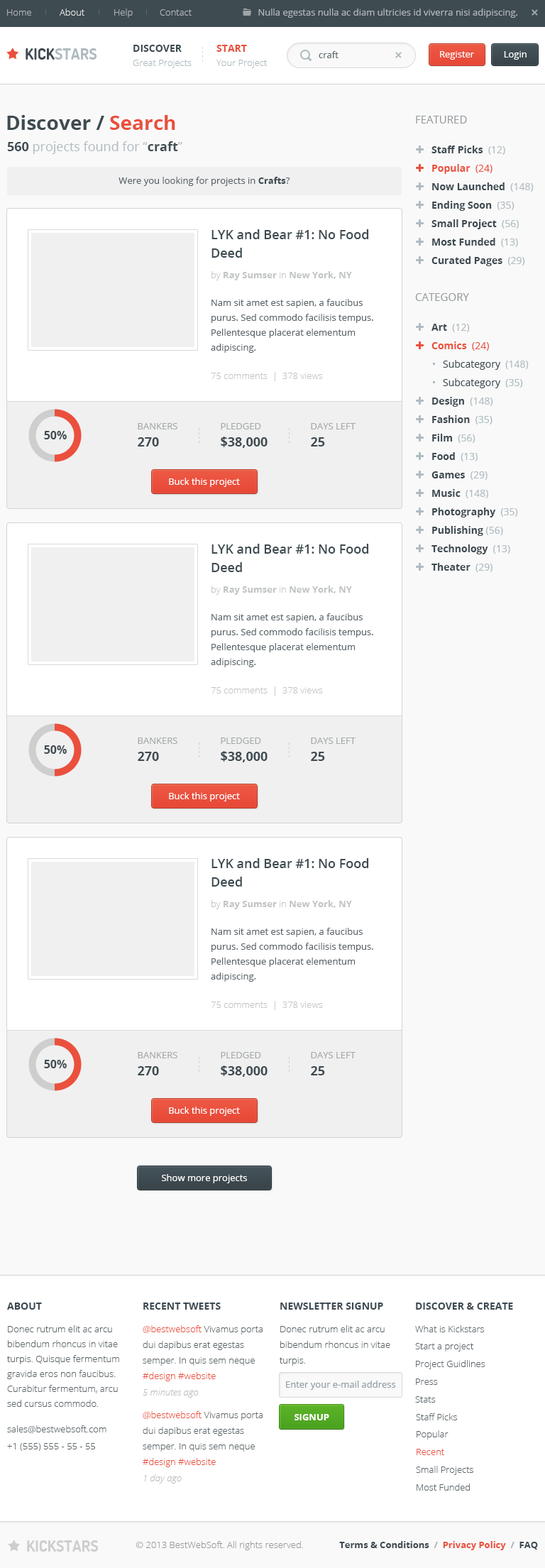
<style>
.page{position:relative;width:545px;height:1568px;background:#ffffff}
.page>*{position:absolute;margin:0}
.t1{font:9.2px "OpenSans-Light";color:#b0b4b6}
.t2{font:9.2px "OpenSans-Light";color:#e1e3e3}
.t3{font:9.2px "OpenSans";color:#b0b4b6}
.t4{font:15.6px "Dosis-Bold";color:#afbbc1;text-transform:uppercase}
.t5{font:15.6px "Dosis-Bold";color:#3e4b51;text-transform:uppercase}
.t6{font:9.9px "OpenSans-Bold";color:#3e4b51;text-transform:uppercase}
.t7{font:9.9px "OpenSans-Bold";color:#ea503d;text-transform:uppercase}
.t8{font:9.2px "OpenSans";color:#5c666b}
.t9{font:9.2px "OpenSans";color:#ffffff}
.t10{font:9.2px "OpenSans-Light";color:#afbbc1}
.t11{font:19.9px "OpenSans-Bold";color:#3e4b51}
.t12{font:19.9px "OpenSans-Bold";color:#ea503d}
.t13{font:10.6px "OpenSans";color:#979da0;text-transform:uppercase}
.t14{font:12.8px "OpenSans";color:#afbbc1}
.t15{font:12.8px "OpenSans-Bold";color:#3e4b51}
.t16{font:9.9px "OpenSans-Bold";color:#3e4b51}
.t17{font:9.9px "OpenSans";color:#afbbc1}
.t18{font:9.9px "OpenSans-Bold";color:#ea503d}
.t19{font:9.9px "OpenSans";color:#ea503d}
.t20{font:9.2px "OpenSans-Bold";color:#3e4b51}
.t21{font:12.8px/18.5px "OpenSans-Semibold";color:#3e4b51}
.t22{font:9.2px "OpenSans-Bold";color:#c1c4c5}
.t23{font:9.2px "OpenSans-Light";color:#c1c4c5}
.t24{font:9.2px/14.9px "OpenSans";color:#5c666b}
.t25{font:9.9px "OpenSans";color:#3e4b51}
.t26{font:9.2px "OpenSans";color:#a6aaac;text-transform:uppercase}
.t27{font:11.4px "OpenSans-Bold";color:#3e4b51}
.t28{font:9.9px "OpenSans-Bold";color:#3e4a51;text-transform:uppercase}
.t29{font:9.2px/14.9px "OpenSans-Light";color:#5c666b}
.t30{font:9.2px/15.6px "OpenSans-Light";color:#5c666b}
.t31{font:9.2px/15.6px "OpenSans-Light";color:#ea503d}
.t32{font:9.2px "OpenSans-Light";color:#5c666b}
.t33{font:9.2px "OpenSans";color:#909da3}
.t34{font:9.2px "OpenSansLight-Italic";color:#b9bcbe}
.t35{font:9.2px "OpenSans-Bold";color:#ffffff;text-transform:uppercase}
.t36{font:9.2px "OpenSans-Light";color:#ea503d}
.t37{font:15.6px "Dosis-Bold";color:#cecece;text-transform:uppercase}
.t38{font:9.2px "OpenSans-Light";color:#999999}
.t39{font:9.2px "OpenSans-Bold";color:#3e4a51}
.t40{font:9.2px "OpenSans-Bold";color:#aeaeae}
.t41{font:9.2px "OpenSans-Bold";color:#ea503d}
</style>
<div class="page">
<p class="t1" style="left:7px;top:9px;width:24px;height:7px">Home</p>
<p class="t2" style="left:60px;top:9px;width:24px;height:7px">About</p>
<p class="t1" style="left:114px;top:9px;width:19px;height:9px">Help</p>
<p class="t1" style="left:160px;top:9px;width:32px;height:7px">Contact</p>
<p class="t3" style="left:258px;top:9px;width:260px;height:9px">Nulla egestas nulla ac diam ultricies id viverra nisi adipiscing.</p>
<p class="t4" style="left:26px;top:48px;width:71px;height:12px"><span class="t5">Kick</span>stars</p>
<p class="t6" style="left:133px;top:45px;width:49px;height:7px">Discover</p>
<p class="t7" style="left:216px;top:45px;width:31px;height:7px">Start</p>
<p class="t8" style="left:319px;top:51px;width:20px;height:7px">craft</p>
<p class="t9" style="left:440px;top:51px;width:34px;height:9px">Register</p>
<p class="t9" style="left:504px;top:51px;width:23px;height:9px">Login</p>
<p class="t10" style="left:133px;top:60px;width:59px;height:8px">Great Projects</p>
<p class="t10" style="left:216px;top:60px;width:52px;height:8px">Your Project</p>
<p class="t11" style="left:7px;top:115px;width:168px;height:15px">Discover / <span class="t12">Search</span></p>
<p class="t13" style="left:416px;top:116px;width:51px;height:8px">Featured</p>
<p class="t14" style="left:7px;top:141px;width:175px;height:13px"><span class="t15">560</span> projects found for “<span class="t15">craft</span>”</p>
<p class="t16" style="left:432px;top:146px;width:73px;height:9px">Staff Picks <span class="t17"> (12)</span></p>
<p class="t18" style="left:432px;top:164px;width:61px;height:10px">Popular <span class="t19"> (24)</span></p>
<p class="t8" style="left:119px;top:177px;width:171px;height:9px">Were you looking for projects in <span class="t20">Crafts</span>?</p>
<p class="t16" style="left:432px;top:182px;width:102px;height:10px">Now Launched <span class="t17"> (148)</span></p>
<p class="t16" style="left:432px;top:201px;width:83px;height:10px">Ending Soon <span class="t17"> (35)</span></p>
<p class="t16" style="left:432px;top:219px;width:87px;height:10px">Small Project <span class="t17"> (56)</span></p>
<p class="t21" style="left:212px;top:229px;width:157px;height:29px">LYK and Bear #1: No Food Deed<br>Unpunished</p>
<p class="t16" style="left:432px;top:238px;width:86px;height:9px">Most Funded <span class="t17"> (13)</span></p>
<p class="t16" style="left:432px;top:256px;width:93px;height:10px">Curated Pages <span class="t17"> (29)</span></p>
<p class="t22" style="left:212px;top:271px;width:140px;height:9px"><span class="t23">by </span>Ray Sumser<span class="t23"> in </span>New York, NY</p>
<p class="t13" style="left:415px;top:293px;width:54px;height:8px">Category</p>
<p class="t24" style="left:211px;top:299px;width:162px;height:54px">Nam sit amet est sapien, a faucibus purus. Sed commodo facilisis tempus. Pellentesque placerat elementum adipiscing.</p>
<p class="t17" style="left:432px;top:324px;width:38px;height:8px"><span class="t16">Art </span> (12)</p>
<p class="t18" style="left:432px;top:341px;width:57px;height:10px">Comics <span class="t19"> (24)</span></p>
<p class="t25" style="left:443px;top:360px;width:86px;height:10px">Subcategory <span class="t17"> (148)</span></p>
<p class="t23" style="left:211px;top:372px;width:112px;height:9px">75 comments  |  378 views</p>
<p class="t25" style="left:443px;top:378px;width:80px;height:10px">Subcategory <span class="t17"> (35)</span></p>
<p class="t16" style="left:432px;top:397px;width:61px;height:10px">Design <span class="t17"> (148)</span></p>
<p class="t26" style="left:138px;top:423px;width:39px;height:6px">Bankers</p>
<p class="t26" style="left:221px;top:423px;width:40px;height:6px">Pledged</p>
<p class="t26" style="left:311px;top:423px;width:45px;height:6px">Days Left</p>
<p class="t16" style="left:432px;top:415px;width:61px;height:9px">Fashion <span class="t17"> (35)</span></p>
<p class="t27" style="left:44px;top:431px;width:23px;height:8px">50%</p>
<p class="t15" style="left:138px;top:437px;width:21px;height:9px">270</p>
<p class="t15" style="left:221px;top:437px;width:47px;height:11px">$38,000</p>
<p class="t15" style="left:311px;top:437px;width:14px;height:9px">25</p>
<p class="t16" style="left:432px;top:434px;width:44px;height:9px">Film <span class="t17"> (56)</span></p>
<p class="t16" style="left:432px;top:452px;width:46px;height:9px">Food <span class="t17"> (13)</span></p>
<p class="t16" style="left:432px;top:471px;width:56px;height:9px">Games <span class="t17"> (29)</span></p>
<p class="t9" style="left:169px;top:478px;width:71px;height:9px">Buck this project</p>
<p class="t16" style="left:432px;top:489px;width:56px;height:9px">Music <span class="t17"> (148)</span></p>
<p class="t16" style="left:432px;top:508px;width:86px;height:9px">Photography <span class="t17"> (35)</span></p>
<p class="t16" style="left:432px;top:526px;width:71px;height:10px">Publishing<span class="t17"> (56)</span></p>
<p class="t21" style="left:212px;top:544px;width:157px;height:28px">LYK and Bear #1: No Food Deed<br>Unpunished</p>
<p class="t16" style="left:432px;top:544px;width:78px;height:10px">Technology <span class="t17"> (13)</span></p>
<p class="t16" style="left:432px;top:563px;width:61px;height:9px">Theater <span class="t17"> (29)</span></p>
<p class="t22" style="left:212px;top:586px;width:140px;height:9px"><span class="t23">by </span>Ray Sumser<span class="t23"> in </span>New York, NY</p>
<p class="t24" style="left:211px;top:613px;width:162px;height:54px">Nam sit amet est sapien, a faucibus purus. Sed commodo facilisis tempus. Pellentesque placerat elementum adipiscing.</p>
<p class="t23" style="left:211px;top:686px;width:112px;height:10px">75 comments  |  378 views</p>
<p class="t26" style="left:138px;top:738px;width:39px;height:6px">Bankers</p>
<p class="t26" style="left:221px;top:738px;width:40px;height:6px">Pledged</p>
<p class="t26" style="left:311px;top:738px;width:45px;height:6px">Days Left</p>
<p class="t27" style="left:44px;top:745px;width:23px;height:9px">50%</p>
<p class="t15" style="left:138px;top:752px;width:21px;height:9px">270</p>
<p class="t15" style="left:221px;top:751px;width:47px;height:11px">$38,000</p>
<p class="t15" style="left:311px;top:752px;width:14px;height:9px">25</p>
<p class="t9" style="left:169px;top:792px;width:71px;height:9px">Buck this project</p>
<p class="t21" style="left:212px;top:858px;width:157px;height:29px">LYK and Bear #1: No Food Deed<br>Unpunished</p>
<p class="t22" style="left:212px;top:900px;width:140px;height:9px"><span class="t23">by </span>Ray Sumser<span class="t23"> in </span>New York, NY</p>
<p class="t24" style="left:211px;top:928px;width:162px;height:54px">Nam sit amet est sapien, a faucibus purus. Sed commodo facilisis tempus. Pellentesque placerat elementum adipiscing.</p>
<p class="t23" style="left:211px;top:1001px;width:112px;height:9px">75 comments  |  378 views</p>
<p class="t27" style="left:44px;top:1060px;width:23px;height:8px">50%</p>
<p class="t26" style="left:138px;top:1052px;width:39px;height:6px">Bankers</p>
<p class="t26" style="left:221px;top:1052px;width:40px;height:6px">Pledged</p>
<p class="t26" style="left:311px;top:1052px;width:45px;height:6px">Days Left</p>
<p class="t15" style="left:138px;top:1066px;width:21px;height:9px">270</p>
<p class="t15" style="left:221px;top:1065px;width:47px;height:12px">$38,000</p>
<p class="t15" style="left:311px;top:1066px;width:14px;height:9px">25</p>
<p class="t9" style="left:169px;top:1107px;width:71px;height:9px">Buck this project</p>
<p class="t9" style="left:162px;top:1174px;width:85px;height:9px">Show more projects</p>
<p class="t28" style="left:7px;top:1303px;width:35px;height:7px">About</p>
<p class="t28" style="left:143px;top:1303px;width:78px;height:7px">Recent Tweets</p>
<p class="t28" style="left:280px;top:1303px;width:103px;height:7px">Newsletter Signup</p>
<p class="t28" style="left:416px;top:1303px;width:97px;height:7px">Discover &amp; Create</p>
<p class="t29" style="left:7px;top:1325px;width:112px;height:82px">Donec rutrum elit ac arcu bibendum rhoncus in vitae turpis. Quisque fermentum gravida eros non faucibus. Curabitur fermentum, arcu sed cursus commodo.</p>
<p class="t30" style="left:143px;top:1325px;width:120px;height:56px"><span class="t31">@bestwebsoft</span> Vivamus porta dui dapibus erat egestas semper. In quis sem neque <span class="t31">#design #website</span></p>
<p class="t30" style="left:280px;top:1325px;width:110px;height:41px">Donec rutrum elit ac arcu bibendum rhoncus in vitae turpis.</p>
<p class="t32" style="left:415px;top:1325px;width:69px;height:7px">What is Kickstars</p>
<p class="t32" style="left:415px;top:1343px;width:59px;height:9px">Start a project</p>
<p class="t32" style="left:416px;top:1360px;width:70px;height:9px">Project Guidlines</p>
<p class="t33" style="left:286px;top:1381px;width:110px;height:9px">Enter your e-mail address</p>
<p class="t32" style="left:416px;top:1378px;width:22px;height:7px">Press</p>
<p class="t34" style="left:143px;top:1388px;width:56px;height:10px">5 minutes ago</p>
<p class="t32" style="left:415px;top:1396px;width:21px;height:7px">Stats</p>
<p class="t30" style="left:143px;top:1411px;width:120px;height:56px"><span class="t31">@bestwebsoft</span> Vivamus porta dui dapibus erat egestas semper. In quis sem neque <span class="t31">#design #website</span></p>
<p class="t35" style="left:295px;top:1414px;width:34px;height:6px">Signup</p>
<p class="t32" style="left:416px;top:1413px;width:41px;height:7px">Staff Picks</p>
<p class="t32" style="left:7px;top:1425px;width:99px;height:8px">sales@bestwebsoft.com</p>
<p class="t32" style="left:417px;top:1430px;width:32px;height:10px">Popular</p>
<p class="t32" style="left:7px;top:1443px;width:88px;height:8px">+1 (555) 555 - 55 - 55</p>
<p class="t36" style="left:417px;top:1449px;width:27px;height:6px">Recent</p>
<p class="t32" style="left:416px;top:1466px;width:57px;height:9px">Small Projects</p>
<p class="t34" style="left:144px;top:1474px;width:38px;height:10px">1 day ago</p>
<p class="t32" style="left:417px;top:1484px;width:53px;height:7px">Most Funded</p>
<p class="t37" style="left:27px;top:1540px;width:72px;height:12px">Kickstars</p>
<p class="t38" style="left:136px;top:1541px;width:167px;height:9px">© 2013 BestWebSoft. All rights reserved.</p>
<p class="t39" style="left:339px;top:1541px;width:199px;height:9px">Terms &amp; Conditions <span class="t40"> /  </span><span class="t41">Privacy Policy  </span><span class="t40">/</span>  FAQ</p>
</div>
